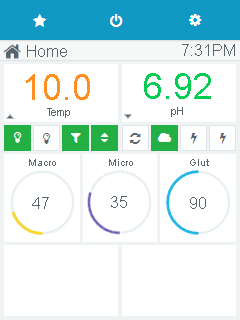
<style>
.page{position:relative;width:240px;height:320px;background:#ffffff}
.page>*{position:absolute;margin:0}
.t1{font:16px "ArialMT";color:#58666e}
.t2{font:36px "ArialMT";color:#ff8f21}
.t3{font:36px "ArialMT";color:#00cd52}
.t4{font:11px "ArialMT";color:#58666e}
.t5{font:10px "ArialMT";color:#58666e}
</style>
<div class="page">
<p class="t1" style="left:27px;top:45px;width:40px;height:12px">Home</p>
<p class="t1" style="left:182px;top:44px;width:53px;height:12px">7:31PM</p>
<p class="t2" style="left:26px;top:74px;width:64px;height:26px">10.0</p>
<p class="t3" style="left:144px;top:73px;width:67px;height:26px">6.92</p>
<p class="t4" style="left:47px;top:108px;width:23px;height:10px">Temp</p>
<p class="t4" style="left:171px;top:107px;width:12px;height:10px">pH</p>
<p class="t5" style="left:29px;top:159px;width:27px;height:7px">Macro</p>
<p class="t5" style="left:109px;top:159px;width:24px;height:7px">Micro</p>
<p class="t5" style="left:190px;top:159px;width:19px;height:7px">Glut</p>
<p class="t1" style="left:32px;top:197px;width:17px;height:12px">47</p>
<p class="t1" style="left:111px;top:196px;width:16px;height:12px">35</p>
<p class="t1" style="left:190px;top:197px;width:16px;height:12px">90</p>
</div>
